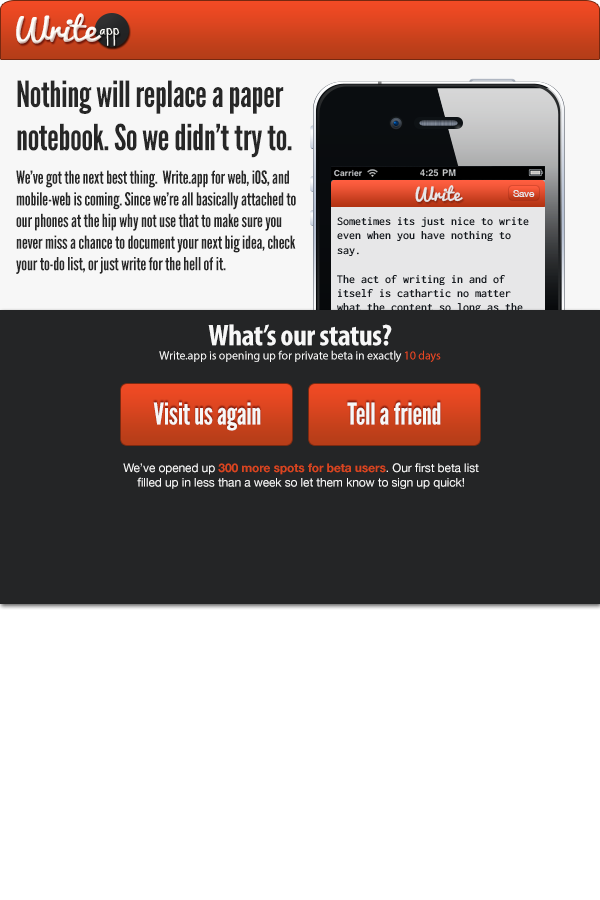
<style>
.page{position:relative;width:600px;height:900px;background:#ffffff}
.page>*{position:absolute;margin:0}
.t1{font:32.6px "Pacifico-Regular";color:#fefdf8}
.t2{font:18.1px "SueEllenFrancisco";color:#fefdf8}
.t3{font:18px "LeagueGothic";letter-spacing:-0.01em;color:#272727}
.t4{font:36px "LeagueGothic";letter-spacing:-0.01em;color:#272727}
.t5{font:18px "Pacifico-Regular";color:#e7e7e8}
.t6{font:10px "HelveticaNeue";color:#e7e7e8}
.t7{font:12px "Inconsolata";color:#171c22}
.t8{font:12px "MyriadPro-Regular";letter-spacing:-0.01em;color:#f7f7f7}
.t9{font:30px "MyriadPro-BoldCond";letter-spacing:-0.01em;color:#f7f7f7}
.t10{font:12px "MyriadPro-Regular";letter-spacing:-0.01em;color:#e74822}
.t11{font:30px "LeagueGothic";letter-spacing:-0.01em;color:#f7f7f7}
.t12{font:6px "LeagueGothic";letter-spacing:-0.01em;color:#f7f7f7}
.t13{font:12px "HelveticaNeue";letter-spacing:-0.01em;color:#f7f7f7}
.t14{font:12px "HelveticaNeue-Bold";letter-spacing:-0.01em;color:#d8451f}
</style>
<div class="page">
<p class="t1" style="left:16px;top:13px;width:86px;height:31px">Write</p>
<p class="t2" style="left:99px;top:28px;width:21px;height:18px">app</p>
<p class="t3" style="left:16px;top:80px;width:280px;height:194px"><span class="t4">Nothing will replace a paper notebook. So we didn’t try to.<br><br></span>We’ve got the next best thing.  Write.app for web, iOS, and mobile-web is coming. Since we’re all basically attached to our phones at the hip why not use that to make sure you never miss a chance to document your next big idea, check your to-do list, or just write for the hell of it.</p>
<p class="t5" style="left:415px;top:185px;width:48px;height:17px">Write</p>
<p class="t6" style="left:513px;top:190px;width:22px;height:7px">Save</p>
<p class="t7" style="left:337px;top:217px;width:192px;height:111px">Sometimes its just nice to write even when you have nothing to say.<br><br>The act of writing in and of itself is cathartic no matter what the content so long as the message is sincere.</p>
<p class="t8" style="left:159px;top:324px;width:282px;height:38px;text-align:center"><span class="t9">What’s our status?<br></span>Write.app is opening up for private beta in exactly <span class="t10">10 days</span></p>
<p class="t11" style="left:153px;top:402px;width:108px;height:29px"><span class="t12"><br></span>Visit us again</p>
<p class="t11" style="left:347px;top:402px;width:94px;height:23px"><span class="t12"><br></span>Tell a friend</p>
<p class="t13" style="left:123px;top:463px;width:356px;height:26px;text-align:center">We’ve opened up <span class="t14">300 more spots for beta users</span>. Our first beta list filled up in less than a week so let them know to sign up quick!</p>
</div>
